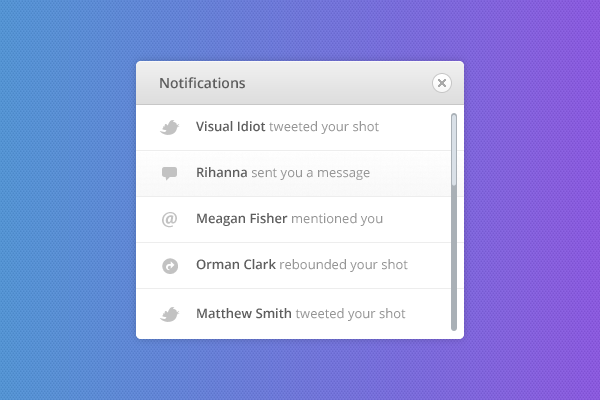
<style>
.page{position:relative;width:600px;height:400px;background:#ffffff}
.page>*{position:absolute;margin:0}
.t1{font:14px "OpenSans-Semibold";color:#5d5d5d}
.t2{font:13px "OpenSans";color:#959595}
.t3{font:13px "OpenSans-Semibold";color:#5d5d5d}
.t4{font:22px "MyriadPro-Bold";color:#c2c2c2}
</style>
<div class="page">
<p class="t1" style="left:160px;top:77px;width:85px;height:12px">Notifications</p>
<p class="t2" style="left:196px;top:121px;width:183px;height:13px"><span class="t3">Visual Idiot </span>tweeted your shot</p>
<p class="t2" style="left:197px;top:167px;width:173px;height:13px"><span class="t3">Rihanna </span>sent you a message</p>
<p class="t4" style="left:162px;top:212px;width:15px;height:16px">@</p>
<p class="t3" style="left:197px;top:213px;width:186px;height:13px">Meagan Fisher <span class="t2">mentioned you</span></p>
<p class="t2" style="left:196px;top:259px;width:212px;height:13px"><span class="t3">Orman Clark </span>rebounded your shot</p>
<p class="t2" style="left:197px;top:308px;width:209px;height:13px"><span class="t3">Matthew Smith </span>tweeted your shot</p>
</div>
